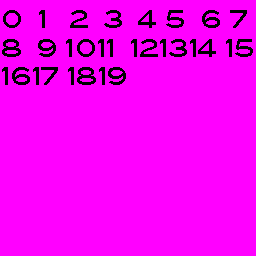
<style>
.page{position:relative;width:256px;height:256px;background:#ff00ff}
.page>*{position:absolute;margin:0}
.t1{font:24px "BlairMdITCTTMedium";color:#000000}
</style>
<div class="page">
<p class="t1" style="left:2px;top:10px;width:251px;height:75px">0  1   2  3  4 5  6 7<br>8  9 1011  121314 15<br>1617 1819</p>
</div>
